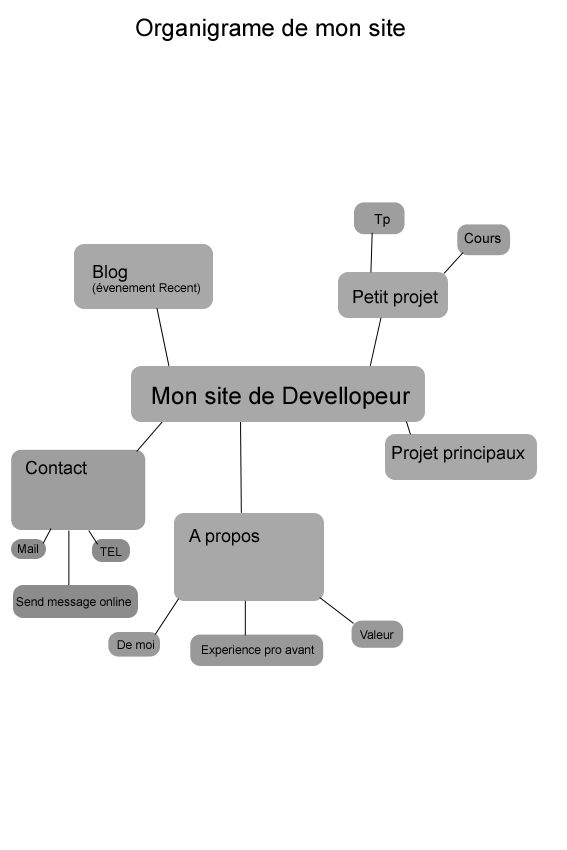
<style>
.page{position:relative;width:567px;height:850px;background:#ffffff}
.page>*{position:absolute;margin:0}
.t1{font:24px "ArialMT";color:#000000}
.t2{font:14px "ArialMT";color:#000000}
.t3{font:12px "ArialMT";color:#000000}
.t4{font:18px "ArialMT";color:#000000}
</style>
<div class="page">
<p class="t1" style="left:136px;top:18px;width:269px;height:23px">Organigrame de mon site</p>
<p class="t2" style="left:374px;top:214px;width:16px;height:13px">Tp</p>
<p class="t2" style="left:464px;top:232px;width:37px;height:12px">Cours</p>
<p class="t3" style="left:92px;top:265px;width:108px;height:30px"><span class="t4">Blog<br></span>(évenement Recent)</p>
<p class="t4" style="left:353px;top:290px;width:85px;height:17px">Petit projet</p>
<p class="t1" style="left:152px;top:386px;width:259px;height:23px">Mon site de Devellopeur</p>
<p class="t4" style="left:392px;top:446px;width:133px;height:17px">Projet principaux</p>
<p class="t4" style="left:26px;top:460px;width:61px;height:15px">Contact</p>
<p class="t4" style="left:189px;top:529px;width:71px;height:17px">A propos</p>
<p class="t3" style="left:18px;top:544px;width:20px;height:9px">Mail</p>
<p class="t3" style="left:100px;top:547px;width:22px;height:9px">TEL</p>
<p class="t3" style="left:16px;top:597px;width:115px;height:12px">Send message online</p>
<p class="t3" style="left:360px;top:630px;width:34px;height:9px">Valeur</p>
<p class="t3" style="left:117px;top:640px;width:37px;height:9px">De moi</p>
<p class="t3" style="left:202px;top:645px;width:113px;height:12px">Experience pro avant</p>
</div>
